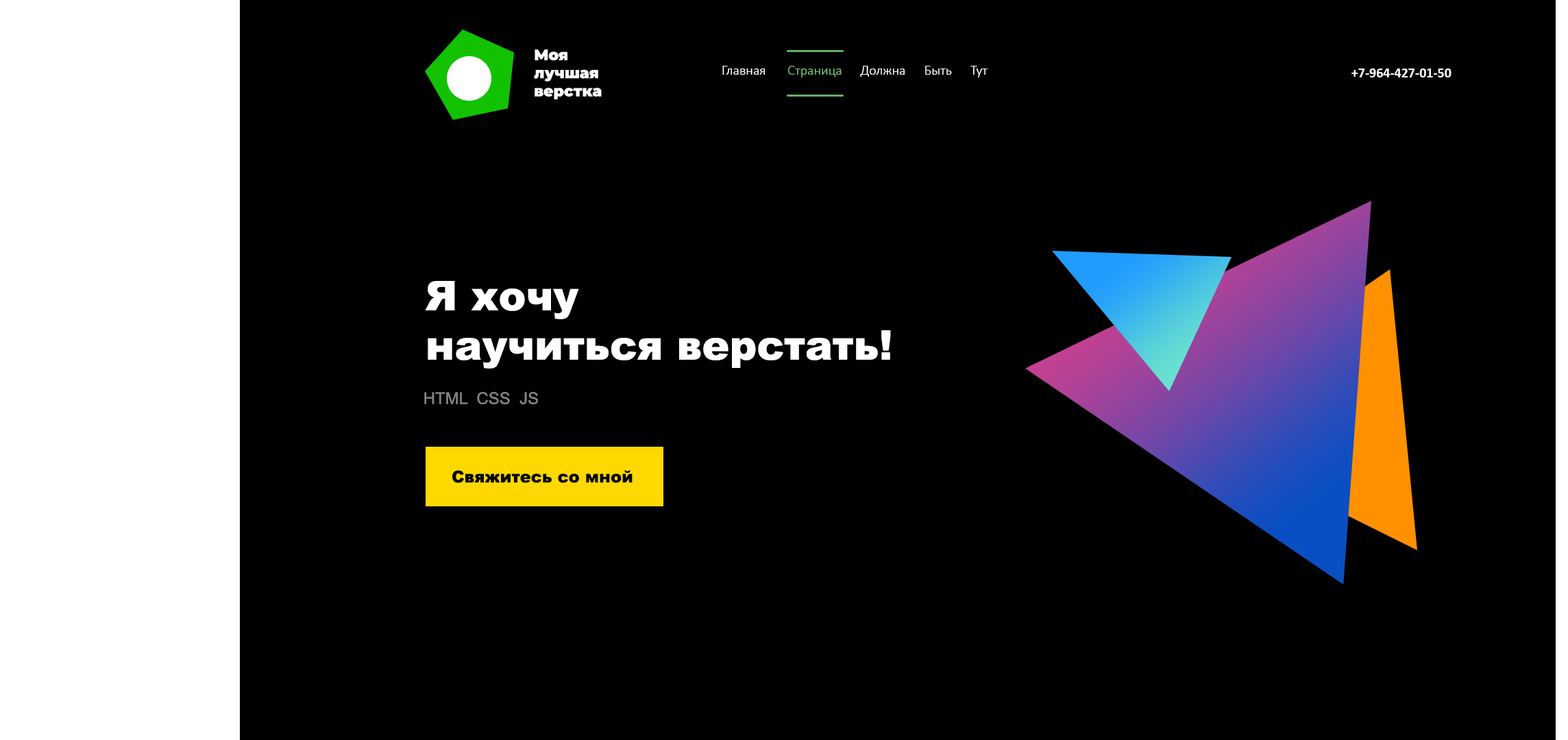
<style>
.page{position:relative;width:1568px;height:740px;background:#000000}
.page>*{position:absolute;margin:0}
.t1{font:13.7px "Calibri-Light";color:#ffffff}
.t2{font:13.7px "Calibri-Light";color:#70c574}
.t3{font:13.7px "Calibri-Bold";color:#ffffff}
.t4{font:41.1px "Arial-Black";color:#ffffff}
.t5{font:16.4px "ArialMT";color:#858585}
.t6{font:16.4px "Arial-Black";color:#000000}
</style>
<div class="page">
<p class="t1" style="left:722px;top:66px;width:266px;height:11px">Главная       <span class="t2">Страница</span>      Должна      Быть      Тут</p>
<p class="t3" style="left:1351px;top:69px;width:100px;height:8px">+7-964-427-01-50</p>
<p class="t4" style="left:425px;top:281px;width:466px;height:88px">Я хочу<br>научиться верстать!</p>
<p class="t5" style="left:424px;top:392px;width:114px;height:12px">HTML  CSS  JS</p>
<p class="t6" style="left:452px;top:470px;width:181px;height:13px">Свяжитесь со мной</p>
</div>
